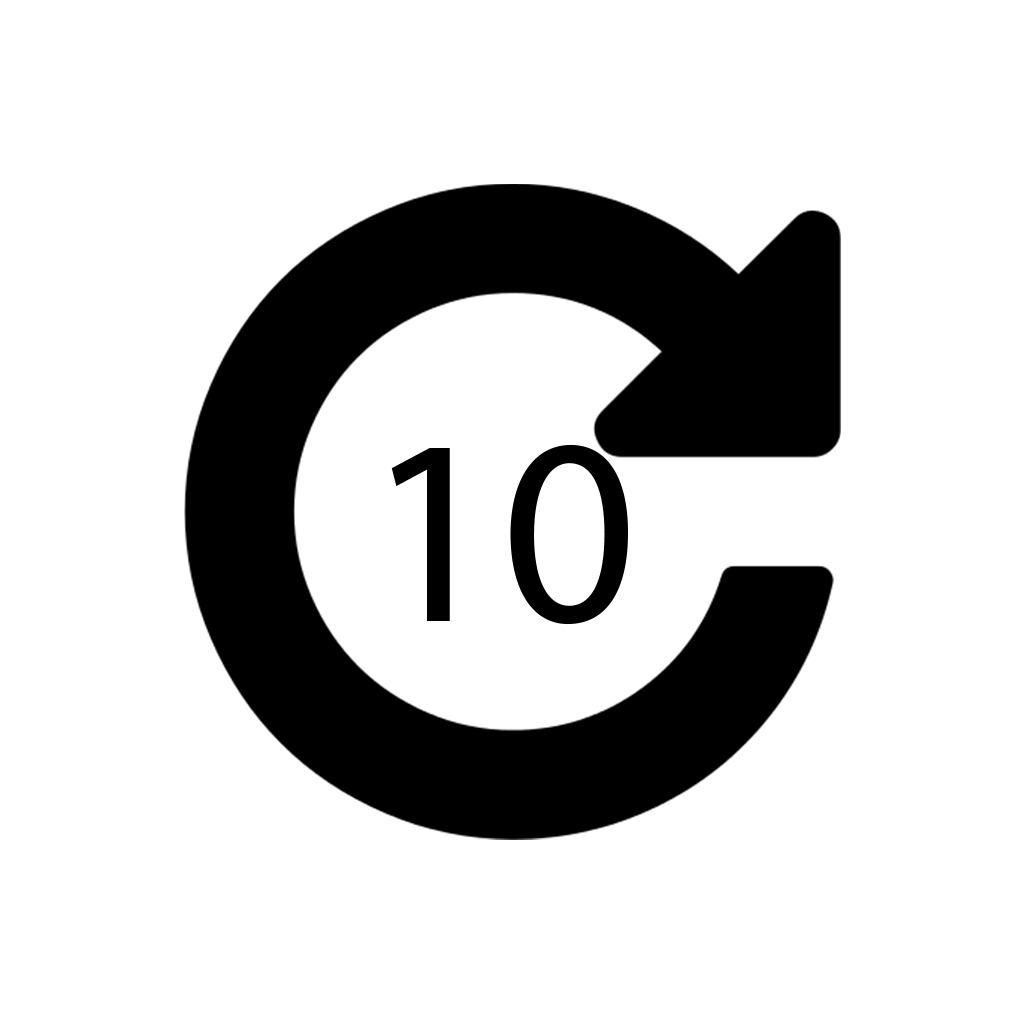
<style>
.page{position:relative;width:1024px;height:1024px;background:#ffffff}
.page>*{position:absolute;margin:0}
.t1{font:266.7px "MyriadPro-Regular";color:#000000}
</style>
<div class="page">
<p class="t1" style="left:391px;top:444px;width:237px;height:181px">10</p>
</div>
